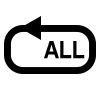
<style>
.page{position:relative;width:100px;height:100px;background:#ffffff}
.page>*{position:absolute;margin:0}
.t1{font:34.7px "AeroMaticsDisplayRegular";color:#000000}
</style>
<div class="page">
<p class="t1" style="left:44px;top:41px;width:41px;height:18px">all</p>
</div>
